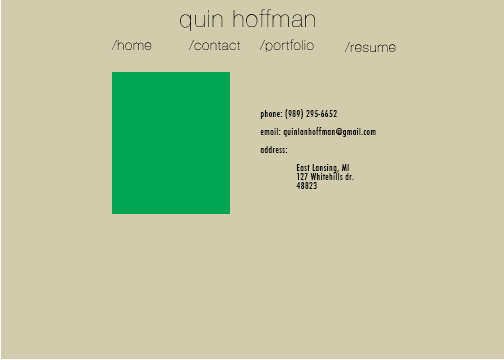
<style>
.page{position:relative;width:504px;height:360px;background:#d3ccac}
.page>*{position:absolute;margin:0}
.t1{font:24px "HelveticaNeue-UltraLight";letter-spacing:0.05em;color:#0b0c0a}
.t2{font:14px "HelveticaNeue-UltraLight";letter-spacing:0.05em}
.t3{font:14px "HelveticaNeue-UltraLight";letter-spacing:0.05em;color:#0b0c0a}
.t4{font:9px/9px "Futura-CondensedMedium";letter-spacing:0.05em;color:#0b0c0a}
</style>
<div class="page">
<p class="t1" style="left:180px;top:9px;width:135px;height:22px">quin hoffman</p>
<p class="t2" style="left:111px;top:40px;width:41px;height:10px">/home</p>
<p class="t2" style="left:188px;top:40px;width:53px;height:10px">/contact</p>
<p class="t3" style="left:259px;top:39px;width:55px;height:13px">/portfolio</p>
<p class="t3" style="left:344px;top:42px;width:52px;height:10px">/resume</p>
<p class="t4" style="left:260px;top:109px;width:116px;height:80px">phone: (989) 295-6652<br><br>email: quinlanhoffman@gmail.com<br><br>address:<br><br> East Lansing, MI<br> 127 Whitehills dr.<br> 48823</p>
</div>
